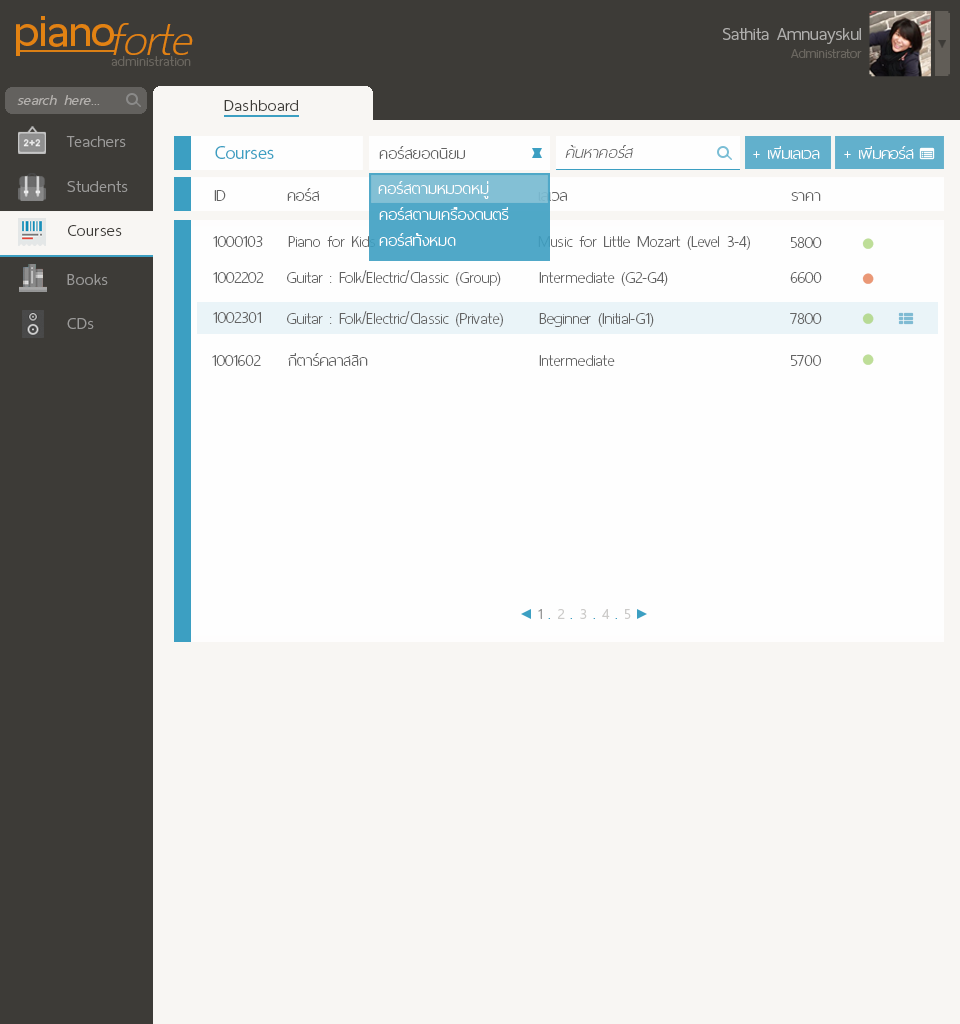
<style>
.page{position:relative;width:960px;height:1024px;background:#f8f6f3}
.page>*{position:absolute;margin:0}
.t1{font:60px "ThaiSansNeue-SemiBold";letter-spacing:-0.005em;color:#e28212}
.t2{font:62px "ThaiSansNeue-ExtraLightItalic";letter-spacing:-0.005em;color:#e28212}
.t3{font:24px "ThaiSansNeue-Light";letter-spacing:-0.005em;color:#afaeac}
.t4{font:18px "ThaiSansNeue-Light";letter-spacing:-0.005em;color:#6a665f}
.t5{font:18.5px "ThaiSansNeue-ExtraLight";letter-spacing:0.025em;color:#6a665f}
.t6{font:20px "ThaiSansNeue-LightItalic";letter-spacing:0.025em;color:#b4b1ae}
.t7{font:22px "ThaiSansNeue-Light";letter-spacing:0.025em;color:#3d3b37}
.t8{font:22px "ThaiSansNeue-Light";letter-spacing:0.025em;color:#9b9a99}
.t9{font:26px "ThaiSansNeue-Light";letter-spacing:-0.005em;color:#3c9fc2}
.t10{font:22px "ThaiSansNeue-UltraLight";letter-spacing:0.01em;color:#636363}
.t11{font:22px "ThaiSansNeue-UltraLightItalic";letter-spacing:0.01em;color:#636363}
.t12{font:22px "ThaiSansNeue-UltraLight";color:#fefefe}
.t13{font:22px "ThaiSansNeue-UltraLight";letter-spacing:0.01em;color:#fefefe}
.t14{font:22px "ThaiSansNeue-UltraLight";color:#636363}
.t15{font:22px "ThaiSansNeue-UltraLight"}
.t16{font:20px "ThaiSansNeue-Light";color:#989898}
.t17{font:20px "ThaiSansNeue-Light";color:#3c9fc2}
.t18{font:20px "ThaiSansNeue-Light";color:#cccbc9}
</style>
<div class="page">
<p class="t1" style="left:16px;top:16px;width:98px;height:40px">piano</p>
<p class="t2" style="left:113px;top:23px;width:80px;height:32px">forte</p>
<p class="t3" style="left:723px;top:28px;width:138px;height:16px">Sathita Amnuayskul</p>
<p class="t4" style="left:791px;top:49px;width:71px;height:9px">Administrator</p>
<p class="t5" style="left:111px;top:56px;width:80px;height:10px">administration</p>
<p class="t6" style="left:17px;top:95px;width:83px;height:10px">search here...</p>
<p class="t7" style="left:224px;top:100px;width:74px;height:11px">Dashboard</p>
<p class="t8" style="left:66px;top:136px;width:60px;height:11px">Teachers</p>
<p class="t9" style="left:215px;top:146px;width:59px;height:13px">Courses</p>
<p class="t10" style="left:379px;top:146px;width:86px;height:13px">คอร์สยอดนิยม</p>
<p class="t11" style="left:565px;top:145px;width:69px;height:13px">ค้นหาคอร์ส</p>
<p class="t12" style="left:753px;top:146px;width:67px;height:13px">+ เพิ่มเลเวล</p>
<p class="t12" style="left:844px;top:146px;width:70px;height:13px">+ เพิ่มคอร์ส</p>
<p class="t8" style="left:67px;top:181px;width:61px;height:11px">Students</p>
<p class="t13" style="left:378px;top:181px;width:111px;height:18px">คอร์สตามหมวดหมู่</p>
<p class="t14" style="left:214px;top:190px;width:12px;height:11px">ID</p>
<p class="t14" style="left:287px;top:188px;width:32px;height:13px">คอร์ส</p>
<p class="t15" style="left:538px;top:192px;width:29px;height:9px">เลเวล</p>
<p class="t14" style="left:791px;top:192px;width:30px;height:9px">ราคา</p>
<p class="t13" style="left:379px;top:207px;width:130px;height:13px">คอร์สตามเครื่องดนตรี</p>
<p class="t7" style="left:68px;top:225px;width:54px;height:11px">Courses</p>
<p class="t13" style="left:379px;top:233px;width:77px;height:13px">คอร์สทั้งหมด</p>
<p class="t14" style="left:213px;top:236px;width:50px;height:11px">1000103</p>
<p class="t14" style="left:288px;top:236px;width:87px;height:11px">Piano for Kids</p>
<p class="t14" style="left:538px;top:236px;width:212px;height:14px">Music for Little Mozart (Level 3-4)</p>
<p class="t14" style="left:791px;top:237px;width:31px;height:11px">5800</p>
<p class="t14" style="left:287px;top:270px;width:214px;height:16px">Guitar : Folk/Electric/Classic (Group)</p>
<p class="t8" style="left:67px;top:274px;width:41px;height:11px">Books</p>
<p class="t14" style="left:213px;top:272px;width:51px;height:11px">1002202</p>
<p class="t14" style="left:539px;top:272px;width:129px;height:14px">Intermediate (G2-G4)</p>
<p class="t14" style="left:790px;top:272px;width:32px;height:11px">6600</p>
<p class="t8" style="left:67px;top:318px;width:27px;height:11px">CDs</p>
<p class="t14" style="left:213px;top:312px;width:48px;height:11px">1002301</p>
<p class="t14" style="left:287px;top:311px;width:216px;height:16px">Guitar : Folk/Electric/Classic (Private)</p>
<p class="t14" style="left:539px;top:313px;width:115px;height:14px">Beginner (Initial-G1)</p>
<p class="t14" style="left:790px;top:313px;width:32px;height:11px">7800</p>
<p class="t14" style="left:288px;top:353px;width:80px;height:13px">กีตาร์คลาสสิก</p>
<p class="t14" style="left:212px;top:355px;width:49px;height:11px">1001602</p>
<p class="t14" style="left:539px;top:355px;width:76px;height:11px">Intermediate</p>
<p class="t14" style="left:791px;top:355px;width:30px;height:11px">5700</p>
<p class="t16" style="left:538px;top:609px;width:93px;height:10px">1 <span class="t17">.</span><span class="t18"> 2 </span><span class="t17">.</span><span class="t18"> 3 </span><span class="t17">.</span><span class="t18"> 4 </span><span class="t17">. </span><span class="t18">5</span></p>
</div>
